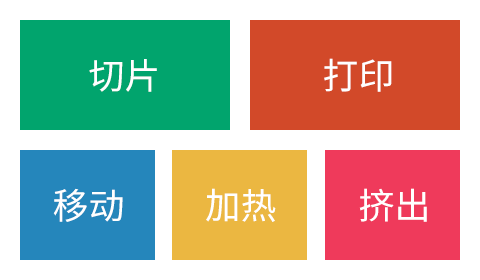
<style>
.page{position:relative;width:480px;height:280px;background:#ffffff}
.page>*{position:absolute;margin:0}
.t1{font:36px "NotoSansHans-Regular";color:#ffffff}
</style>
<div class="page">
<p class="t1" style="left:89px;top:59px;width:68px;height:33px">切片</p>
<p class="t1" style="left:324px;top:58px;width:68px;height:34px">打印</p>
<p class="t1" style="left:53px;top:188px;width:70px;height:34px">移动</p>
<p class="t1" style="left:206px;top:188px;width:70px;height:34px">加热</p>
<p class="t1" style="left:359px;top:188px;width:68px;height:34px">挤出</p>
</div>
